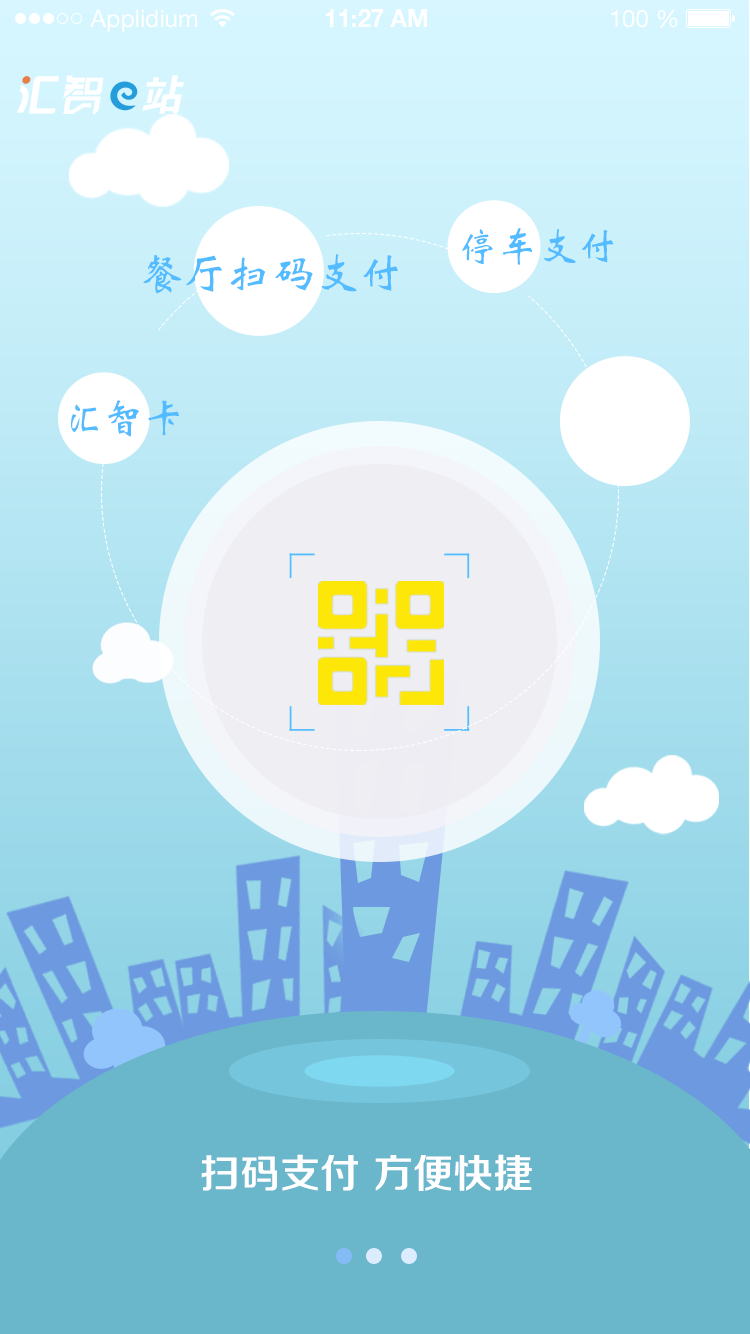
<style>
.page{position:relative;width:750px;height:1334px}
.page>*{position:absolute;margin:0}
.t1{font:24px "HelveticaNeueLTStd-Roman";color:#ffffff}
.t2{font:24px "HelveticaNeueLTStd-Bd";color:#ffffff}
.t3{font:40px "STXinwei";color:#53bbff;text-transform:uppercase}
.t4{font:44px "STXinwei";color:#53bbff;text-transform:uppercase}
.t5{font:40px "FZZZHONGJW--GB1-0";color:#ffffff;text-transform:uppercase}
</style>
<div class="page">
<p class="t1" style="left:90px;top:9px;width:107px;height:23px">Applidium</p>
<p class="t2" style="left:325px;top:9px;width:102px;height:18px">11:27 AM</p>
<p class="t1" style="left:611px;top:9px;width:67px;height:19px">100 %</p>
<p class="t3" style="left:462px;top:228px;width:152px;height:37px">停车支付</p>
<p class="t4" style="left:143px;top:254px;width:255px;height:40px">餐厅扫码支付</p>
<p class="t3" style="left:71px;top:400px;width:108px;height:37px">汇智卡</p>
<p class="t5" style="left:201px;top:1154px;width:331px;height:37px">扫码支付 方便快捷</p>
</div>
